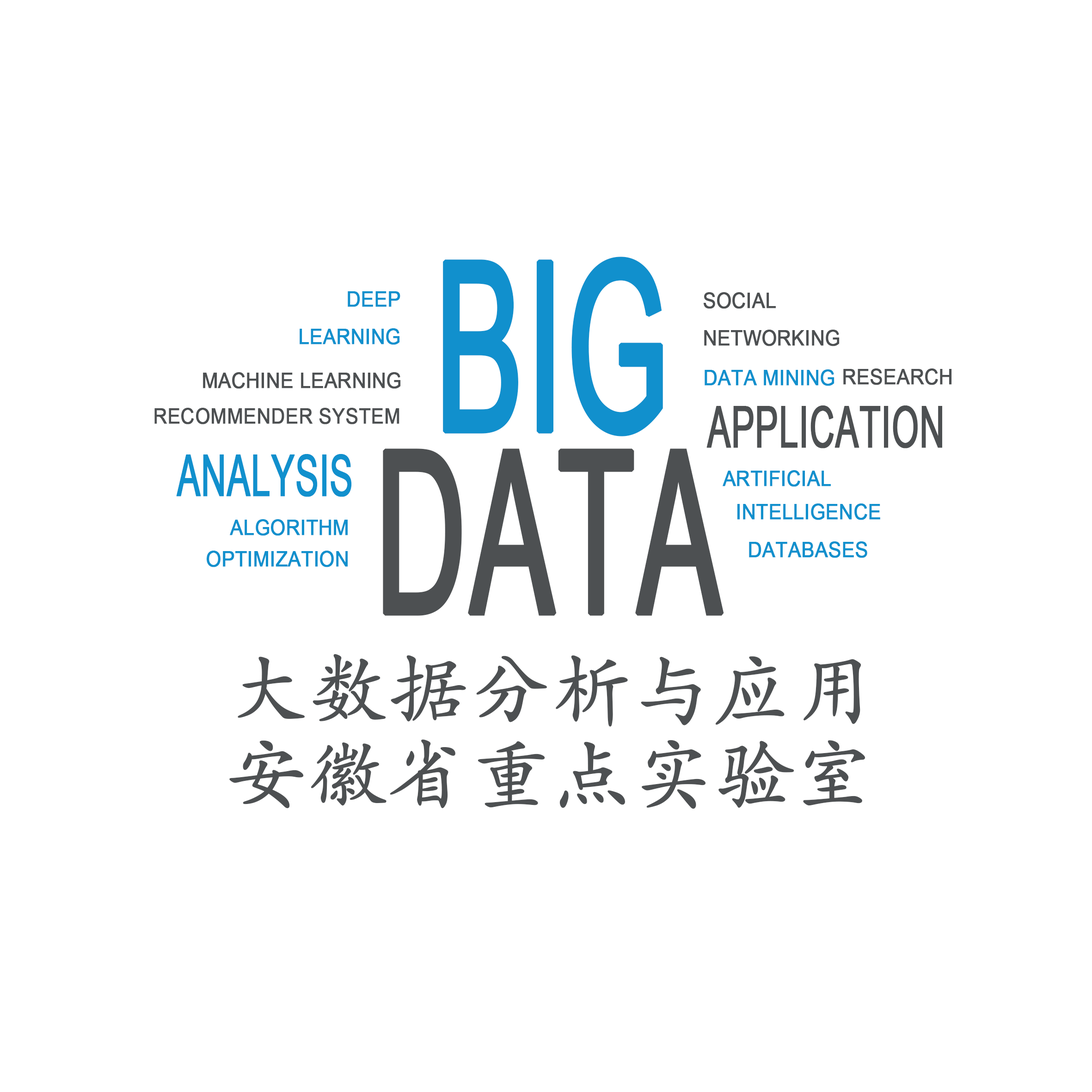
<style>
.page{position:relative;width:1092px;height:1092px;background:#ffffff}
.page>*{position:absolute;margin:0}
.t1{font:236.8px "ArialMT";color:#1190cd;font-weight:bold;scale:0.55 1}
.t2{font:21.3px/37.7px "ArialMT";color:#1190cd;font-weight:bold;scale:0.9 1}
.t3{font:21.3px/37.6px "ArialMT";color:#4d5052;font-weight:bold;scale:0.9 1}
.t4{font:21.3px "ArialMT";color:#4d5052;font-weight:bold;scale:0.9 1}
.t5{font:21.3px "ArialMT";color:#1190cd;font-weight:bold;scale:0.91 1}
.t6{font:21.3px "ArialMT";color:#4d5052;font-weight:bold;scale:0.91 1}
.t7{font:57.4px "ArialMT";color:#4d5052;font-weight:bold;scale:0.6 1}
.t8{font:227.2px "ArialMT";color:#4d5052;font-weight:bold;scale:0.55 1}
.t9{font:57.4px "ArialMT";color:#1190cd;font-weight:bold;scale:0.6 1}
.t10{font:21.3px/31.5px "ArialMT";color:#1190cd;font-weight:bold;scale:0.91 1}
.t11{font:79.1px/84.9px "STKaiti";color:#4d5052;font-weight:bold}
</style>
<div class="page">
<p class="t1" style="left:443px;top:257px;width:220px;height:179px">BIG</p>
<p class="t2" style="left:300px;top:291px;width:100px;height:54px;text-align:right">DEEP<br>LEARNING</p>
<p class="t3" style="left:703px;top:292px;width:137px;height:54px">SOCIAL <br>NETWORKING</p>
<p class="t4" style="left:203px;top:372px;width:198px;height:17px">MACHINE LEARNING</p>
<p class="t5" style="left:705px;top:369px;width:129px;height:17px">DATA MINING</p>
<p class="t6" style="left:843px;top:368px;width:109px;height:17px">RESEARCH</p>
<p class="t4" style="left:154px;top:408px;width:245px;height:16px">RECOMMENDER SYSTEM</p>
<p class="t7" style="left:706px;top:405px;width:236px;height:43px">APPLICATION</p>
<p class="t8" style="left:383px;top:448px;width:341px;height:168px">DATA</p>
<p class="t9" style="left:176px;top:454px;width:176px;height:43px">ANALYSIS</p>
<p class="t5" style="left:723px;top:470px;width:108px;height:17px">ARTIFICIAL</p>
<p class="t5" style="left:737px;top:503px;width:143px;height:17px">INTELLIGENCE</p>
<p class="t10" style="left:207px;top:519px;width:141px;height:48px;text-align:right">ALGORITHM<br>OPTIMIZATION</p>
<p class="t5" style="left:749px;top:541px;width:118px;height:17px">DATABASES</p>
<p class="t11" style="left:229px;top:654px;width:636px;height:155px;text-align:right">大数据分析与应用<br>安徽省重点实验室</p>
</div>
